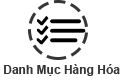
<style>
.page{position:relative;width:120px;height:80px;background:#ffffff}
.page>*{position:absolute;margin:0}
.t1{font:12px "Arial-BoldMT";color:#363636}
</style>
<div class="page">
<p class="t1" style="left:4px;top:64px;width:116px;height:12px">Danh Mục Hàng Hóa</p>
</div>
